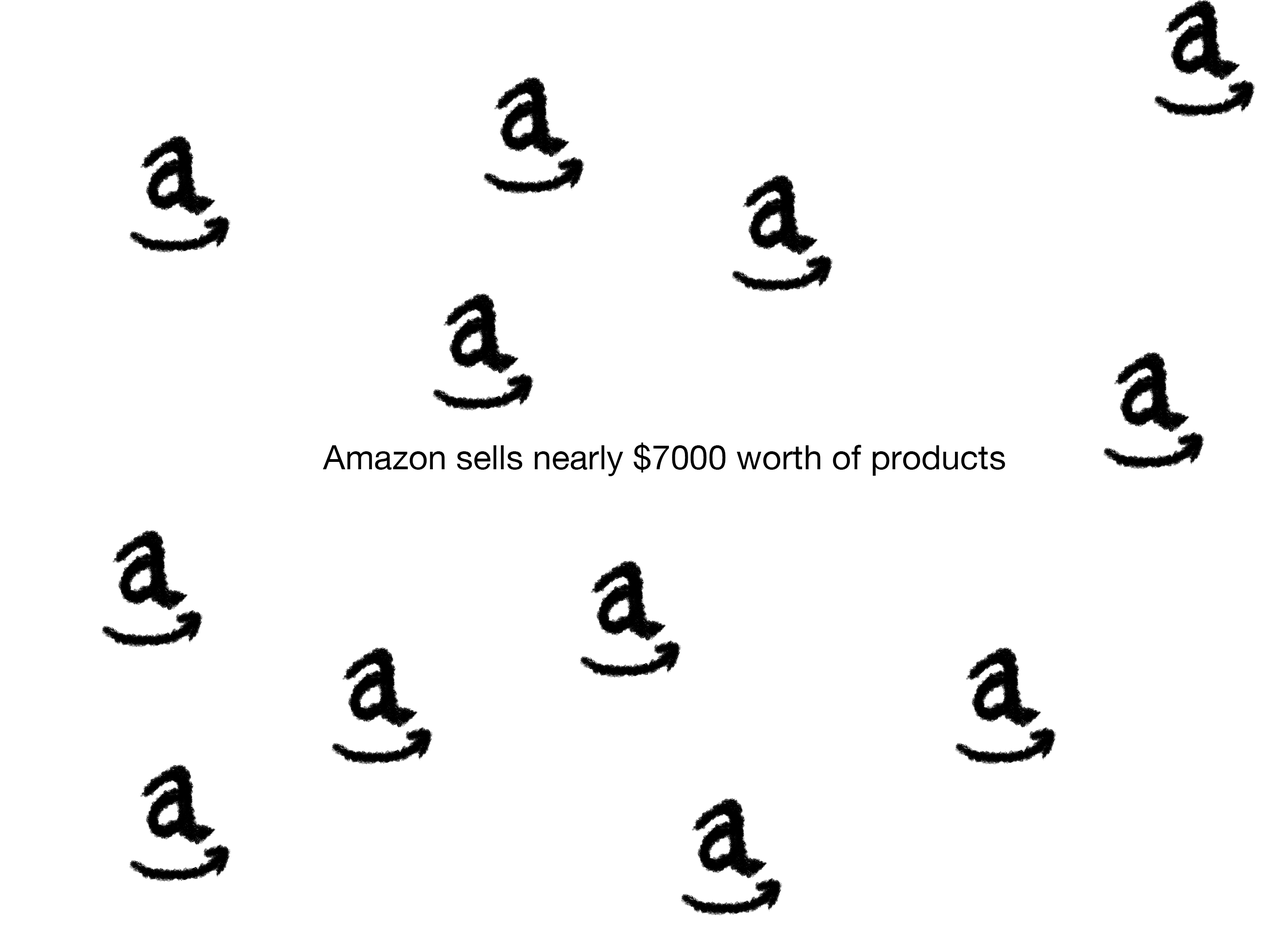
<style>
.page{position:relative;width:1261px;height:945px;background:#ffffff}
.page>*{position:absolute;margin:0}
.t1{font:33.9px "HelveticaNeue";color:#000000}
</style>
<div class="page">
<p class="t1" style="left:323px;top:443px;width:682px;height:33px">Amazon sells nearly $7000 worth of products</p>
</div>
